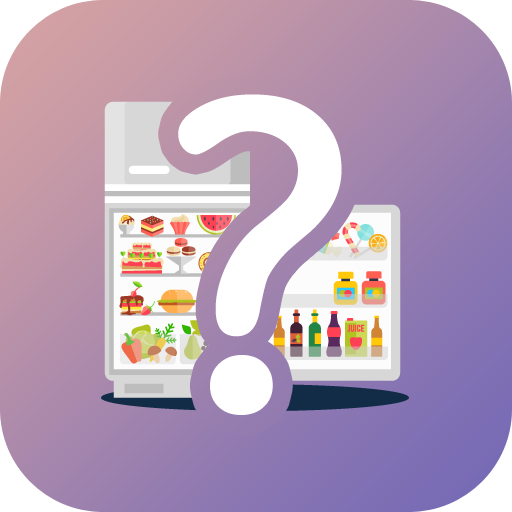
<style>
.page{position:relative;width:512px;height:512px}
.page>*{position:absolute;margin:0}
.t1{font:462px "KristenITC-Regular";color:#ffffff}
</style>
<div class="page">
<p class="t1" style="left:178px;top:94px;width:164px;height:321px">?</p>
</div>
